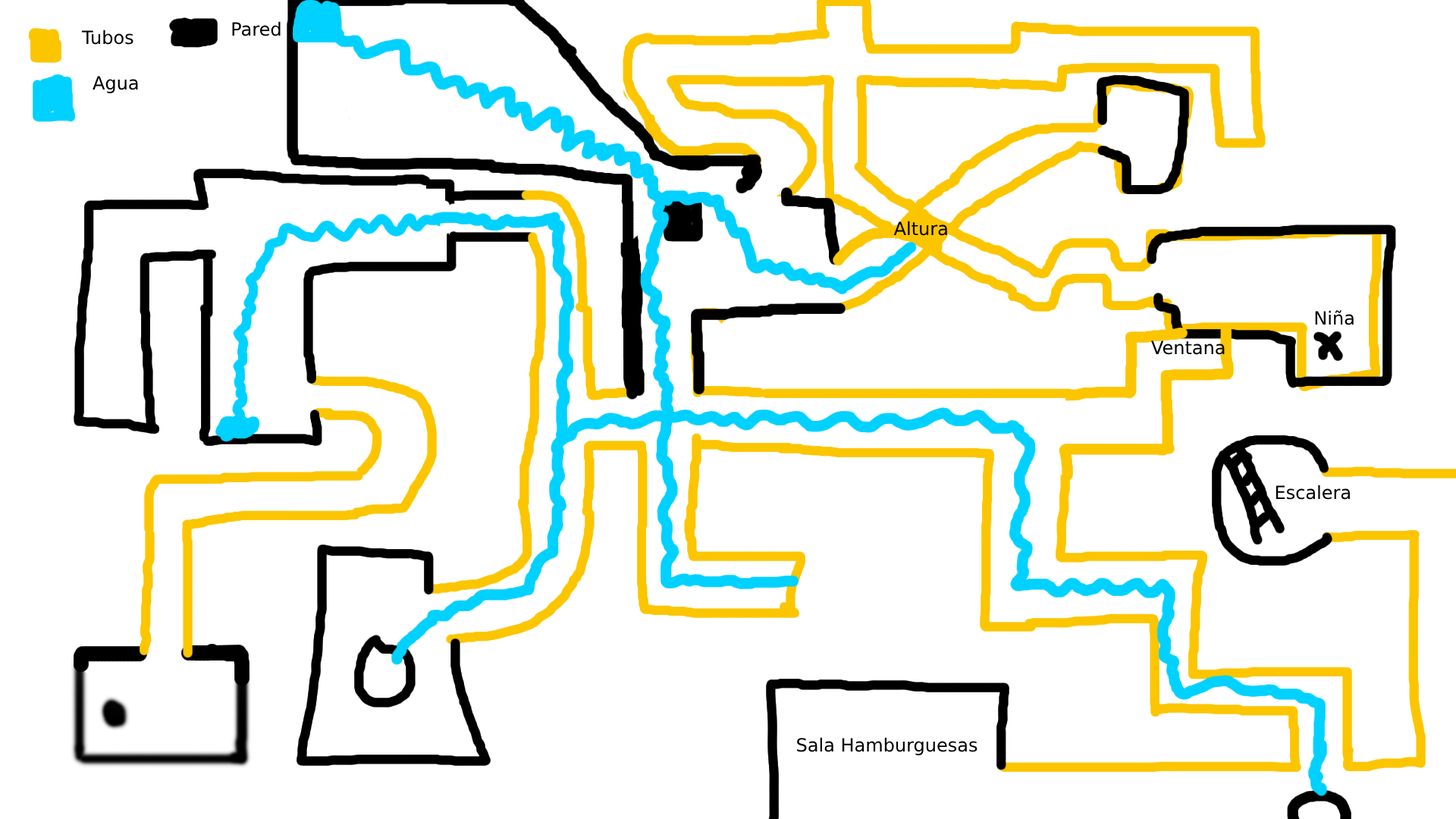
<style>
.page{position:relative;width:1456px;height:819px;background:#ffffff}
.page>*{position:absolute;margin:0}
.t1{font:18.2px "DejaVuSans";color:#000000}
</style>
<div class="page">
<p class="t1" style="left:81px;top:30px;width:52px;height:15px">Tubos</p>
<p class="t1" style="left:232px;top:21px;width:49px;height:15px">Pared</p>
<p class="t1" style="left:893px;top:221px;width:54px;height:15px">Altura</p>
<p class="t1" style="left:1315px;top:310px;width:39px;height:15px">Niña</p>
<p class="t1" style="left:1151px;top:340px;width:74px;height:15px">Ventana</p>
<p class="t1" style="left:1275px;top:485px;width:75px;height:15px">Escalera</p>
<p class="t1" style="left:797px;top:737px;width:180px;height:18px">Sala Hamburguesas</p>
</div>
